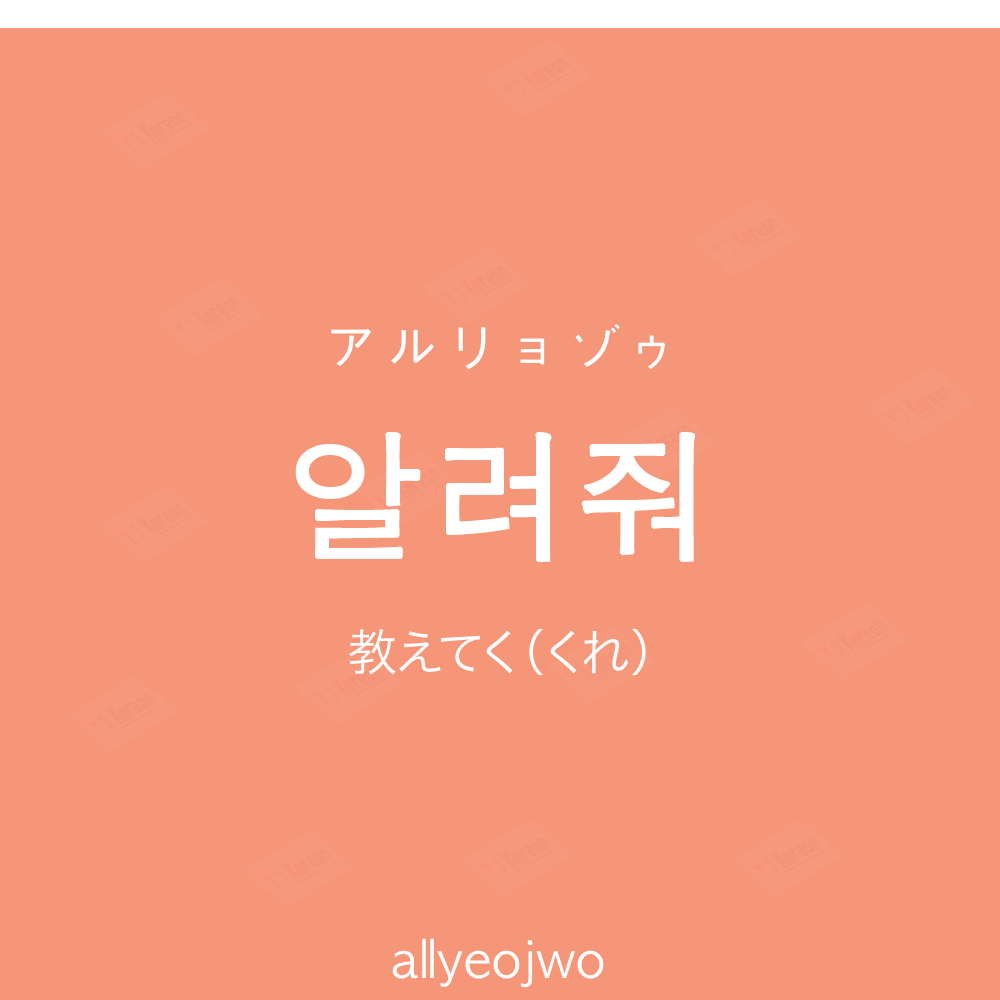
<style>
.page{position:relative;width:1000px;height:1000px;background:#f69679}
.page>*{position:absolute;margin:0}
.t1{font:60px "AppleGothic";color:#ffffff}
.t2{font:140px "AppleGothic";color:#ffffff;font-weight:bold}
.t3{font:50px "HiraKakuProN-W3";color:#ffffff}
.t4{font:50px "AppleGothic";color:#ffffff}
</style>
<div class="page">
<p class="t1" style="left:331px;top:324px;width:335px;height:46px">アルリョゾゥ</p>
<p class="t2" style="left:295px;top:432px;width:401px;height:130px">알려줘</p>
<p class="t3" style="left:349px;top:628px;width:297px;height:48px">教えてく（くれ）</p>
<p class="t4" style="left:392px;top:938px;width:212px;height:50px">allyeojwo</p>
</div>
